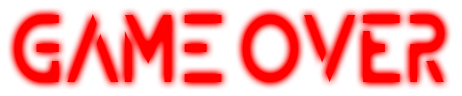
<style>
.page{position:relative;width:462px;height:96px;background:#ffffff}
.page>*{position:absolute;margin:0}
.t1{font:92px "ZELDA";color:#ff0000;scale:0.81 1}
</style>
<div class="page">
<p class="t1" style="left:14px;top:14px;width:431px;height:68px">Game OVER</p>
</div>
